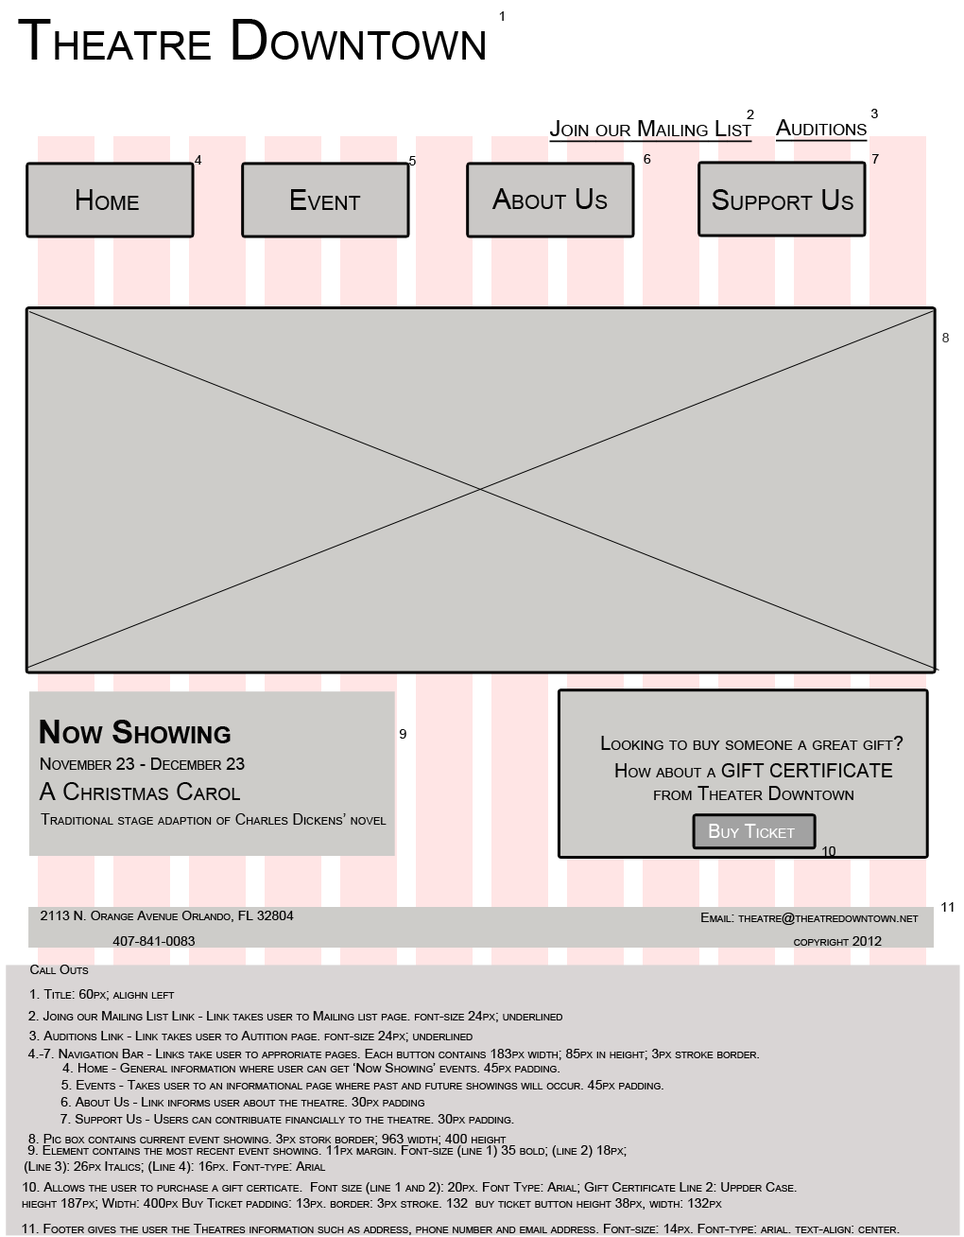
<style>
.page{position:relative;width:964px;height:1237px;background:#cdccc9}
.page>*{position:absolute;margin:0}
.t1{font:13.2px "ArialMT";color:#050505;font-variant:small-caps}
.t2{font:56.7px "ArialMT";color:#030303;font-variant:small-caps}
.t3{font:22.7px "ArialMT";color:#050505;font-variant:small-caps;text-decoration:underline}
.t4{font:28.4px "ArialMT";color:#050505;font-variant:small-caps}
.t5{font:13.2px "ArialMT";color:#373737;font-variant:small-caps}
.t6{font:33.1px "Arial-BoldMT";color:#050505;font-variant:small-caps}
.t7{font:18.9px "ArialMT";color:#050505;font-variant:small-caps}
.t8{font:17px "ArialMT";color:#050505;font-variant:small-caps}
.t9{font:24.6px "ArialMT";color:#050505;font-variant:small-caps}
.t10{font:15.1px "ArialMT";color:#050505;font-variant:small-caps}
.t11{font:18.9px "ArialMT";color:#ffffff;font-variant:small-caps}
</style>
<div class="page">
<p class="t1" style="left:499px;top:11px;width:5px;height:10px">1</p>
<p class="t2" style="left:18px;top:19px;width:467px;height:41px">Theatre Downtown</p>
<p class="t1" style="left:747px;top:110px;width:7px;height:9px">2</p>
<p class="t1" style="left:872px;top:109px;width:6px;height:9px">3</p>
<p class="t3" style="left:549px;top:120px;width:204px;height:23px">Join our Mailing List</p>
<p class="t3" style="left:776px;top:119px;width:92px;height:23px">Auditions</p>
<p class="t1" style="left:195px;top:155px;width:7px;height:9px">4</p>
<p class="t1" style="left:409px;top:156px;width:7px;height:9px">5</p>
<p class="t1" style="left:644px;top:154px;width:7px;height:10px">6</p>
<p class="t1" style="left:873px;top:154px;width:6px;height:10px">7</p>
<p class="t4" style="left:77px;top:189px;width:62px;height:21px">Home</p>
<p class="t4" style="left:291px;top:189px;width:70px;height:21px">Event</p>
<p class="t4" style="left:492px;top:188px;width:116px;height:21px">About Us</p>
<p class="t4" style="left:712px;top:189px;width:142px;height:21px">Support Us</p>
<p class="t5" style="left:943px;top:333px;width:6px;height:9px">8</p>
<p class="t6" style="left:40px;top:719px;width:191px;height:24px">Now Showing</p>
<p class="t1" style="left:400px;top:729px;width:7px;height:9px">9</p>
<p class="t7" style="left:601px;top:736px;width:303px;height:14px">Looking to buy someone a great gift?</p>
<p class="t8" style="left:41px;top:757px;width:204px;height:13px">November 23 - December 23</p>
<p class="t7" style="left:615px;top:763px;width:278px;height:37px;text-align:center">How about a GIFT CERTIFICATE<br>from Theater Downtown</p>
<p class="t9" style="left:39px;top:782px;width:201px;height:18px">A Christmas Carol</p>
<p class="t10" style="left:41px;top:813px;width:346px;height:11px">Traditional stage adaption of Charles Dickens’ novel</p>
<p class="t11" style="left:709px;top:823px;width:86px;height:15px">Buy Ticket</p>
<p class="t1" style="left:822px;top:846px;width:14px;height:10px">10</p>
<p class="t1" style="left:942px;top:902px;width:12px;height:9px">11</p>
<p class="t1" style="left:41px;top:910px;width:253px;height:12px">2113 N. Orange Avenue Orlando, FL 32804</p>
<p class="t1" style="left:701px;top:912px;width:218px;height:13px">Email: theatre@theatredowntown.net</p>
<p class="t1" style="left:113px;top:936px;width:82px;height:9px">407-841-0083</p>
<p class="t1" style="left:794px;top:936px;width:88px;height:9px">copyright 2012</p>
<p class="t1" style="left:30px;top:964px;width:59px;height:10px">Call Outs</p>
<p class="t1" style="left:30px;top:989px;width:145px;height:11px">1. Title: 60px; alighn left</p>
<p class="t1" style="left:28px;top:1011px;width:535px;height:11px">2. Joing our Mailing List Link - Link takes user to Mailing list page. font-size 24px; underlined</p>
<p class="t1" style="left:29px;top:1030px;width:444px;height:12px">3. Auditions Link - Link takes user to Autition page. font-size 24px; underlined</p>
<p class="t1" style="left:27px;top:1048px;width:732px;height:12px">4.-7. Navigation Bar - Links take user to approriate pages. Each button contains 183px width; 85px in height; 3px stroke border.</p>
<p class="t1" style="left:62px;top:1063px;width:498px;height:9px">4. Home - General information where user can get ‘Now Showing’ events. 45px padding.</p>
<p class="t1" style="left:61px;top:1080px;width:603px;height:9px">5. Events - Takes user to an informational page where past and future showings will occur. 45px padding.</p>
<p class="t1" style="left:61px;top:1097px;width:363px;height:9px">6. About Us - Link informs user about the theatre. 30px padding</p>
<p class="t1" style="left:61px;top:1114px;width:453px;height:9px">7. Support Us - Users can contribuate financially to the theatre. 30px padding.</p>
<p class="t1" style="left:28px;top:1134px;width:479px;height:11px">8. Pic box contains current event showing. 3px stork border; 963 width; 400 height</p>
<p class="t1" style="left:25px;top:1145px;width:602px;height:28px;text-align:center">9. Element contains the most recent event showing. 11px margin. Font-size (line 1) 35 bold; (line 2) 18px; <br>(Line 3): 26px Italics; (Line 4): 16px. Font-type: Arial</p>
<p class="t1" style="left:22px;top:1182px;width:775px;height:27px">10. Allows the user to purchase a gift certicate.  Font size (line 1 and 2): 20px. Font Type: Arial; Gift Certificate Line 2: Uppder Case. <br>hieght 187px; Width: 400px Buy Ticket padding: 13px. border: 3px stroke. 132  buy ticket button height 38px, width: 132px</p>
<p class="t1" style="left:22px;top:1223px;width:878px;height:12px">11. Footer gives the user the Theatres information such as address, phone number and email address. Font-size: 14px. Font-type: arial. text-align: center.</p>
</div>
